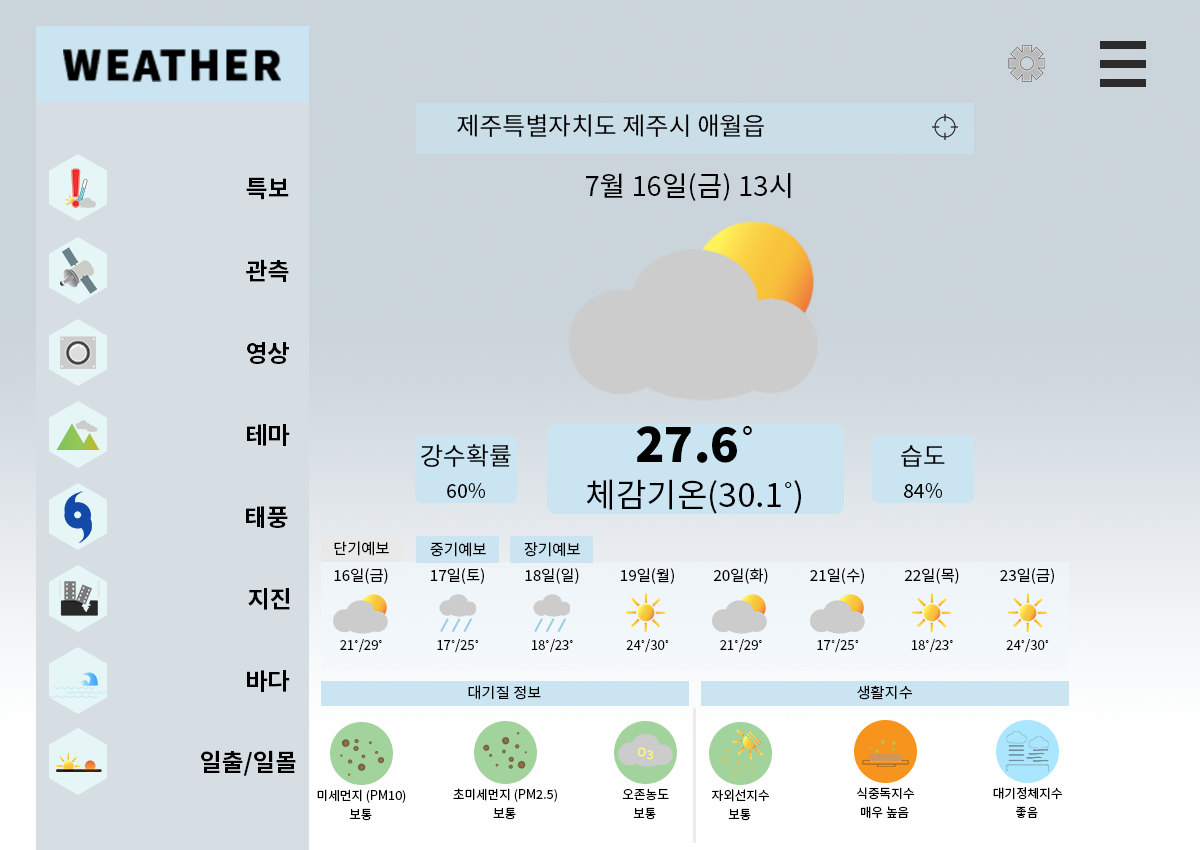
<style>
.page{position:relative;width:1200px;height:850px}
.page>*{position:absolute;margin:0}
.t1{font:24.9px "NotoSansKR-Regular";color:#000000}
.t2{font:27.7px "NotoSansKR-Regular";color:#000000}
.t3{font:24px "NotoSansKR-Bold";color:#000000}
.t4{font:33.2px/44.2px "NotoSansKR-Regular";color:#000000}
.t5{font:47.9px/44.2px "NotoSansKR-Black";color:#000000}
.t6{font:47.9px/44.2px "Gulim";color:#000000}
.t7{font:33.2px/44.2px "Gulim";color:#000000}
.t8{font:24.9px/33.2px "NotoSansKR-Regular";color:#000000}
.t9{font:19.4px/33.2px "NotoSansKR-Regular";color:#000000}
.t10{font:15.4px "NotoSansKR-Regular";color:#000000}
.t11{font:15.5px "NotoSansKR-Regular";color:#000000}
.t12{font:13.2px "NotoSansKR-Regular";color:#000000}
.t13{font:13.2px "Gulim";color:#000000}
.t14{font:14.7px "NotoSansKR-Regular";color:#000000;scale:1.04 1}
.t15{font:12.6px "NotoSansKR-Regular";color:#000000}
</style>
<div class="page">
<p class="t1" style="left:457px;top:114px;width:307px;height:23px">제주특별자치도 제주시 애월읍</p>
<p class="t2" style="left:586px;top:173px;width:205px;height:28px">7월 16일(금) 13시</p>
<p class="t3" style="left:246px;top:177px;width:43px;height:23px">특보</p>
<p class="t3" style="left:246px;top:259px;width:43px;height:23px">관측</p>
<p class="t3" style="left:247px;top:342px;width:42px;height:22px">영상</p>
<p class="t3" style="left:247px;top:424px;width:43px;height:22px">테마</p>
<p class="t4" style="left:586px;top:426px;width:215px;height:88px;text-align:center"><span class="t5">27.6</span><span class="t6">˚<br></span>체감기온(30.1<span class="t7">˚</span>)</p>
<p class="t8" style="left:421px;top:444px;width:90px;height:54px;text-align:center">강수확률<br><span class="t9">60%</span></p>
<p class="t9" style="left:901px;top:445px;width:44px;height:53px;text-align:center"><span class="t8">습도<br></span>84%</p>
<p class="t3" style="left:246px;top:506px;width:42px;height:22px">태풍</p>
<p class="t10" style="left:334px;top:541px;width:55px;height:15px">단기예보</p>
<p class="t11" style="left:430px;top:542px;width:56px;height:15px">중기예보</p>
<p class="t11" style="left:524px;top:542px;width:56px;height:15px">장기예보</p>
<p class="t10" style="left:334px;top:568px;width:54px;height:16px">16일(금)</p>
<p class="t10" style="left:430px;top:568px;width:54px;height:16px">17일(토)</p>
<p class="t10" style="left:525px;top:568px;width:54px;height:16px">18일(일)</p>
<p class="t10" style="left:620px;top:568px;width:54px;height:16px">19일(월)</p>
<p class="t10" style="left:713px;top:568px;width:55px;height:16px">20일(화)</p>
<p class="t10" style="left:810px;top:568px;width:54px;height:16px">21일(수)</p>
<p class="t10" style="left:904px;top:568px;width:55px;height:16px">22일(목)</p>
<p class="t10" style="left:1000px;top:568px;width:54px;height:16px">23일(금)</p>
<p class="t3" style="left:248px;top:588px;width:42px;height:22px">지진</p>
<p class="t12" style="left:340px;top:639px;width:42px;height:14px">21<span class="t13">˚</span>/29<span class="t13">˚</span></p>
<p class="t12" style="left:437px;top:639px;width:42px;height:14px">17<span class="t13">˚</span>/25<span class="t13">˚</span></p>
<p class="t12" style="left:531px;top:639px;width:42px;height:14px">18<span class="t13">˚</span>/23<span class="t13">˚</span></p>
<p class="t12" style="left:626px;top:639px;width:43px;height:14px">24<span class="t13">˚</span>/30<span class="t13">˚</span></p>
<p class="t12" style="left:720px;top:639px;width:42px;height:14px">21<span class="t13">˚</span>/29<span class="t13">˚</span></p>
<p class="t12" style="left:817px;top:639px;width:42px;height:14px">17<span class="t13">˚</span>/25<span class="t13">˚</span></p>
<p class="t12" style="left:911px;top:639px;width:42px;height:14px">18<span class="t13">˚</span>/23<span class="t13">˚</span></p>
<p class="t12" style="left:1006px;top:639px;width:43px;height:14px">24<span class="t13">˚</span>/30<span class="t13">˚</span></p>
<p class="t3" style="left:247px;top:670px;width:43px;height:22px">바다</p>
<p class="t14" style="left:468px;top:685px;width:73px;height:15px">대기질 정보</p>
<p class="t14" style="left:857px;top:685px;width:56px;height:15px">생활지수</p>
<p class="t3" style="left:201px;top:750px;width:95px;height:26px">일출/일몰</p>
<p class="t15" style="left:317px;top:789px;width:89px;height:14px">미세먼지 (PM10)</p>
<p class="t15" style="left:453px;top:788px;width:104px;height:14px">초미세먼지 (PM2.5)</p>
<p class="t15" style="left:622px;top:789px;width:47px;height:12px">오존농도</p>
<p class="t15" style="left:711px;top:789px;width:58px;height:13px">자외선지수</p>
<p class="t15" style="left:857px;top:787px;width:57px;height:13px">식중독지수</p>
<p class="t15" style="left:993px;top:787px;width:69px;height:13px">대기정체지수</p>
<p class="t15" style="left:349px;top:808px;width:23px;height:13px">보통</p>
<p class="t15" style="left:493px;top:807px;width:23px;height:13px">보통</p>
<p class="t15" style="left:633px;top:807px;width:23px;height:13px">보통</p>
<p class="t15" style="left:728px;top:808px;width:23px;height:13px">보통</p>
<p class="t15" style="left:861px;top:806px;width:48px;height:13px">매우 높음</p>
<p class="t15" style="left:1016px;top:806px;width:22px;height:12px">좋음</p>
</div>
